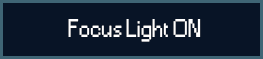
<style>
.page{position:relative;width:263px;height:59px;background:#081426}
.page>*{position:absolute;margin:0}
.t1{font:24px "Small Fonts";color:#ffffff}
</style>
<div class="page">
<p class="t1" style="left:68px;top:19px;width:133px;height:23px">Focus Light ON</p>
</div>
